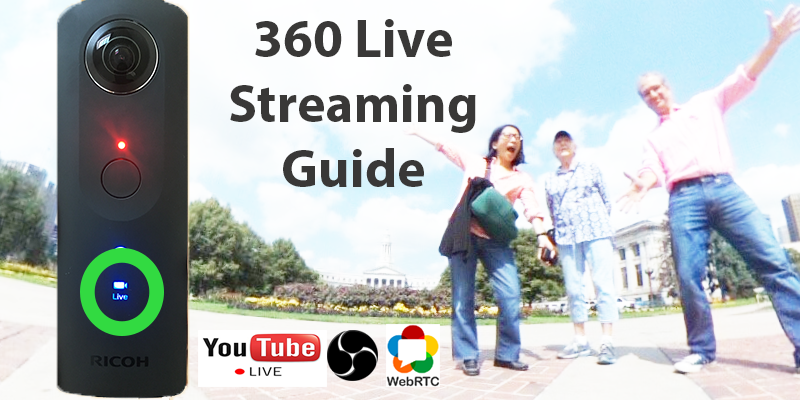
<style>
.page{position:relative;width:800px;height:400px}
.page>*{position:absolute;margin:0}
.t1{font:54px "MyriadPro-Bold";color:#393837}
</style>
<div class="page">
<p class="t1" style="left:230px;top:19px;width:246px;height:168px;text-align:center">360 Live Streaming<br>Guide</p>
</div>
